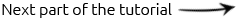
<style>
.page{position:relative;width:237px;height:18px;background:#ffffff}
.page>*{position:absolute;margin:0}
.t1{font:16px "Ubuntu-Light";color:#000000}
</style>
<div class="page">
<p class="t1" style="left:2px;top:3px;width:170px;height:15px">Next part of the tutorial</p>
</div>
